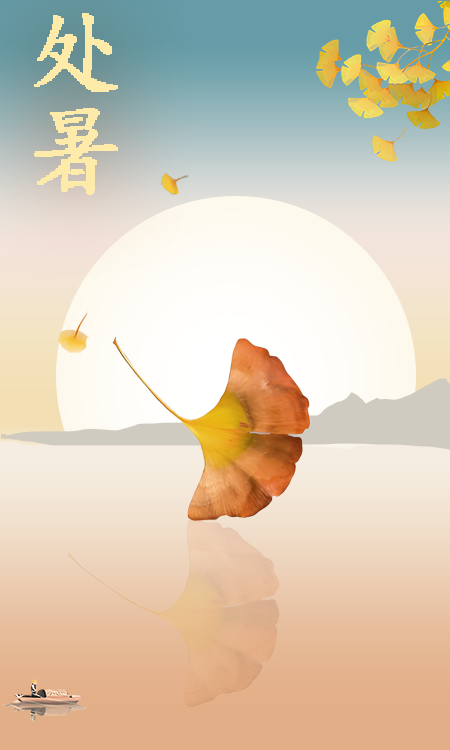
<style>
.page{position:relative;width:450px;height:750px}
.page>*{position:absolute;margin:0}
.t1{font:96px "¿¬Ìå";color:#feeba9;font-weight:bold}
</style>
<div class="page">
<p class="t1" style="left:34px;top:13px;width:84px;height:182px">处暑1</p>
</div>
